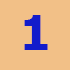
<style>
.page{position:relative;width:70px;height:70px;background:#f2c087}
.page>*{position:absolute;margin:0}
.t1{font:48px "Tahoma-Bold";letter-spacing:0.2em;color:#121bcb}
</style>
<div class="page">
<p class="t1" style="left:24px;top:15px;width:24px;height:35px">1</p>
</div>
